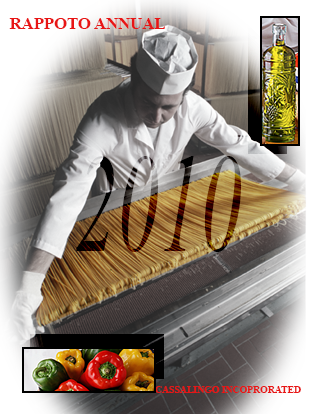
<style>
.page{position:relative;width:309px;height:414px}
.page>*{position:absolute;margin:0}
.t1{font:16.7px "TimesNewRomanPS-BoldMT";color:#e81515}
.t2{font:138.9px "TimesNewRomanPS-ItalicMT";scale:0.6 1}
.t3{font:9.7px "TimesNewRomanPS-BoldMT";color:#e81515}
</style>
<div class="page">
<p class="t1" style="left:9px;top:18px;width:156px;height:11px">RAPPOTO ANNUAL</p>
<p class="t2" style="left:76px;top:156px;width:165px;height:96px">2010</p>
<p class="t3" style="left:155px;top:386px;width:146px;height:7px">CASSALINGO INCOPRORATED</p>
</div>
